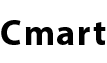
<style>
.page{position:relative;width:107px;height:63px;background:#ffffff}
.page>*{position:absolute;margin:0}
.t1{font:36px "MyriadPro-Bold";letter-spacing:0.05em;color:#000000}
</style>
<div class="page">
<p class="t1" style="left:1px;top:20px;width:105px;height:25px">Cmart</p>
</div>
